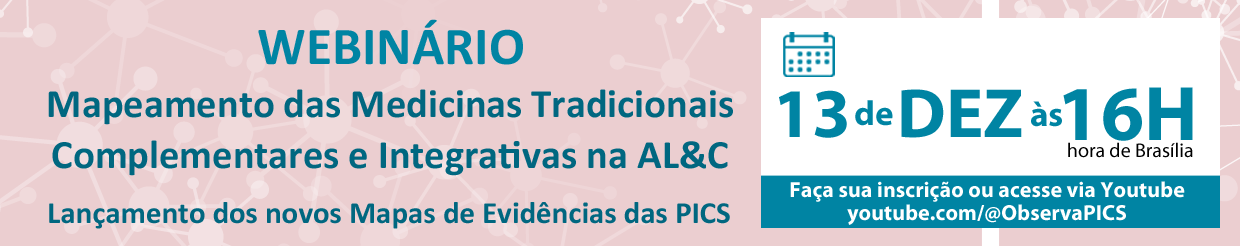
<style>
.page{position:relative;width:1240px;height:246px;background:#ebced0}
.page>*{position:absolute;margin:0}
.t1{font:53.6px "Calibri-Bold";color:#0084a3}
.t2{font:40.4px/26.3px "Calibri-Bold";color:#006780}
.t3{font:70px "MyriadPro-Bold";color:#0084a3}
.t4{font:77.9px "MyriadPro-Bold";color:#0084a3}
.t5{font:35px "MyriadPro-Bold";color:#0084a3}
.t6{font:20px "MyriadPro-Regular";color:#000000}
.t7{font:22px/8px "MyriadPro-Bold";color:#ffffff}
.t8{font:31px "Calibri-Bold";color:#006780}
</style>
<div class="page">
<p class="t1" style="left:258px;top:19px;width:265px;height:46px">WEBINÁRIO</p>
<p class="t2" style="left:48px;top:89px;width:685px;height:87px;text-align:center">Mapeamento das Medicinas Tradicionais<br>Complementares e Integrativas na AL&amp;C</p>
<p class="t3" style="left:901px;top:89px;width:121px;height:49px">DEZ</p>
<p class="t4" style="left:1063px;top:87px;width:130px;height:54px">16H</p>
<p class="t3" style="left:779px;top:90px;width:68px;height:48px">13</p>
<p class="t5" style="left:855px;top:100px;width:38px;height:26px">de</p>
<p class="t5" style="left:1031px;top:101px;width:31px;height:26px">às</p>
<p class="t6" style="left:1068px;top:142px;width:125px;height:16px">hora de Brasília</p>
<p class="t7" style="left:790px;top:181px;width:395px;height:44px;text-align:center">Faça sua inscrição ou acesse via Youtube<br>youtube.com/@ObservaPICS</p>
<p class="t8" style="left:49px;top:202px;width:681px;height:27px">Lançamento dos novos Mapas de Evidências das PICS</p>
</div>
